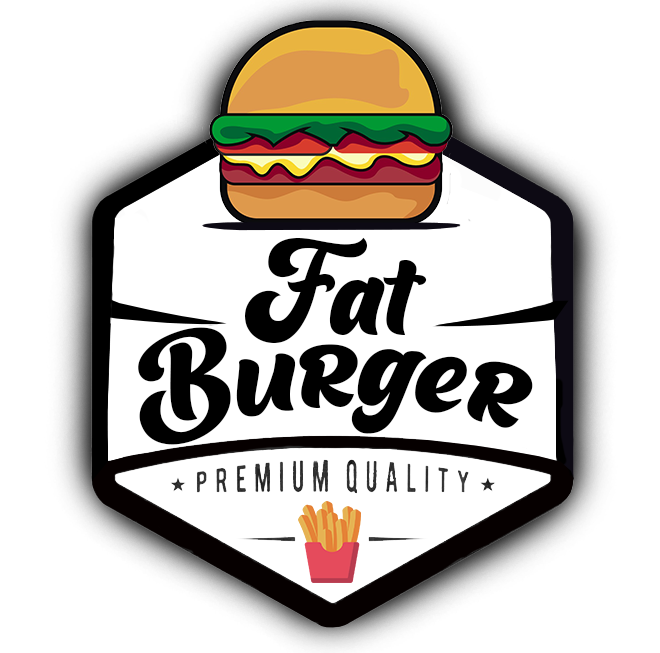
<style>
.page{position:relative;width:660px;height:653px;background:#ffffff}
.page>*{position:absolute;margin:0}
.t1{font:116.4px "Barqish";color:#000000;scale:1.03 1}
.t2{font:120.9px "Barqish";color:#000000}
</style>
<div class="page">
<p class="t1" style="left:245px;top:237px;width:182px;height:106px">Fat</p>
<p class="t2" style="left:138px;top:327px;width:395px;height:118px;rotate:-2deg">Burger</p>
</div>
